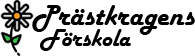
<style>
.page{position:relative;width:195px;height:56px;background:#ffffff}
.page>*{position:absolute;margin:0}
.t1{font:30.4px "HarlowSolid";color:#000000}
.t2{font:25.2px "HarlowSolid";color:#000000}
</style>
<div class="page">
<p class="t1" style="left:32px;top:5px;width:163px;height:30px">Prästkragens</p>
<p class="t2" style="left:40px;top:29px;width:91px;height:22px">Förskola</p>
</div>
